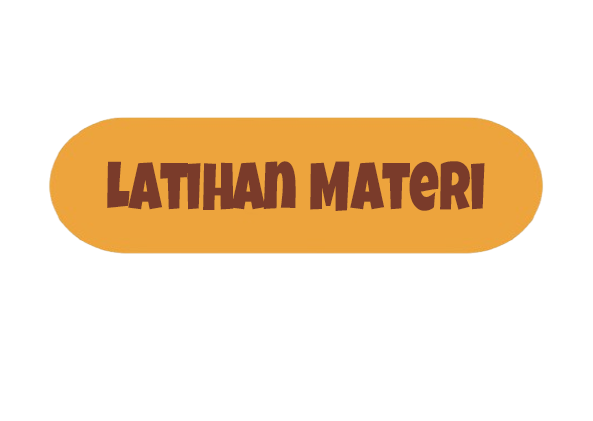
<style>
.page{position:relative;width:593px;height:421px;background:#ffffff}
.page>*{position:absolute;margin:0}
.t1{font:68.2px "LuckiestGuy-Regular";color:#7a3b2a;scale:0.76 1}
</style>
<div class="page">
<p class="t1" style="left:107px;top:161px;width:378px;height:50px">Latihan Materi</p>
</div>
